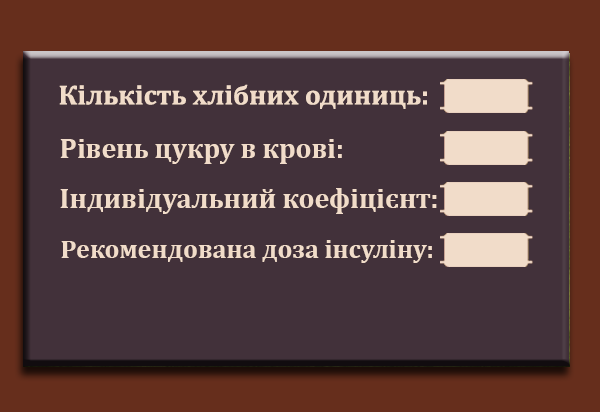
<style>
.page{position:relative;width:600px;height:412px;background:#42313a}
.page>*{position:absolute;margin:0}
.t1{font:28px "Cambria-Bold";color:#f1dcc9}
.t2{font:26px "Cambria-Bold";color:#f1dcc9}
</style>
<div class="page">
<p class="t1" style="left:59px;top:84px;width:368px;height:25px">Кількість хлібних одиниць:</p>
<p class="t1" style="left:60px;top:139px;width:282px;height:25px">Рівень цукру в крові:</p>
<p class="t1" style="left:60px;top:188px;width:377px;height:26px">Індивідуальний коефіцієнт:</p>
<p class="t2" style="left:61px;top:240px;width:371px;height:23px">Рекомендована доза інсуліну:</p>
</div>
